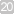
<style>
.page{position:relative;width:14px;height:14px;background:#c5c4c4}
.page>*{position:absolute;margin:0}
.t1{font:12px "ArialMT";letter-spacing:-0.075em;color:#ffffff}
</style>
<div class="page">
<p class="t1" style="left:1px;top:2px;width:12px;height:9px">20</p>
</div>
